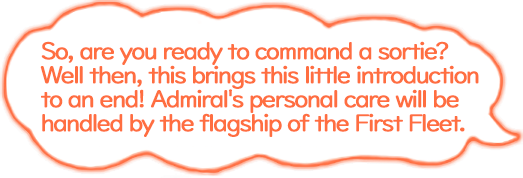
<style>
.page{position:relative;width:523px;height:178px;background:#ffffff}
.page>*{position:absolute;margin:0}
.t1{font:24px/24px "UDDigiKyokashoNP-R";letter-spacing:-0.08em;color:#ff6e40;font-weight:bold}
</style>
<div class="page">
<p class="t1" style="left:40px;top:41px;width:439px;height:96px">So, are you ready to command a sortie?<br>Well then, this brings this little introduction<br>to an end! Admiral's personal care will be<br>handled by the flagship of the First Fleet.</p>
</div>
